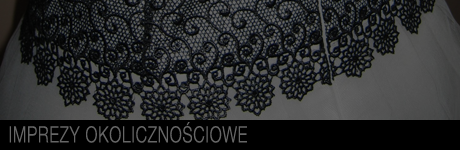
<style>
.page{position:relative;width:460px;height:150px}
.page>*{position:absolute;margin:0}
.t1{font:22.4px "HelveticaNeueCE-Light";letter-spacing:0.05em;color:#666666;scale:0.71 1}
</style>
<div class="page">
<p class="t1" style="left:9px;top:122px;width:238px;height:21px">IMPREZY OKOLICZNOŚCIOWE</p>
</div>
